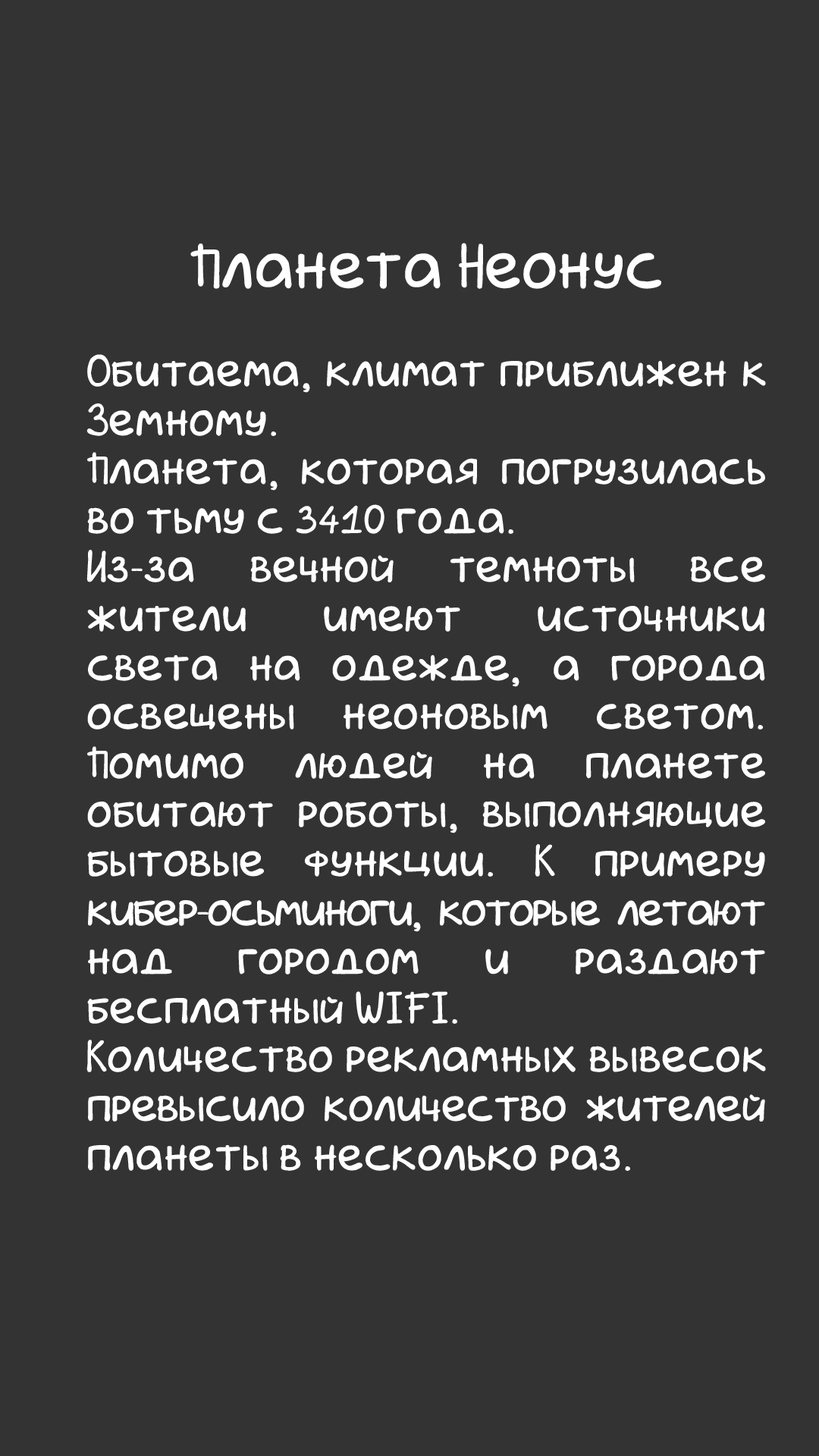
<style>
.page{position:relative;width:819px;height:1456px;background:#333333}
.page>*{position:absolute;margin:0}
.t1{font:39.5px/49px "asinastra";color:#ffffff;scale:1.1 1}
.t2{font:55.3px/49px "asinastra";color:#ffffff;scale:1.1 1}
.t3{font:39.5px/49px "asinastra";letter-spacing:-0.06em;color:#ffffff;scale:1.1 1}
.t4{font:39.5px/49px "asinastra";letter-spacing:-0.02em;color:#ffffff;scale:1.1 1}
</style>
<div class="page">
<p class="t1" style="left:86px;top:243px;width:680px;height:928px;text-align:center"><span class="t2">Планета Неонус<br><br></span>Обитаема, климат приближен к Земному. <br>Планета, которая погрузилась во тьму с 3410 года. <br>Из-за вечной темноты все жители имеют источники света на одежде, а города освещены неоновым светом.  Помимо людей на планете обитают роботы, выполняющие бытовые функции. К примеру <span class="t3">кибер-осьминоги, которые летают</span> над городом и раздают бесплатный WIFI.<br>Количество рекламных вывесок <span class="t4">превысило количество жителей </span>планеты в несколько раз.</p>
</div>
